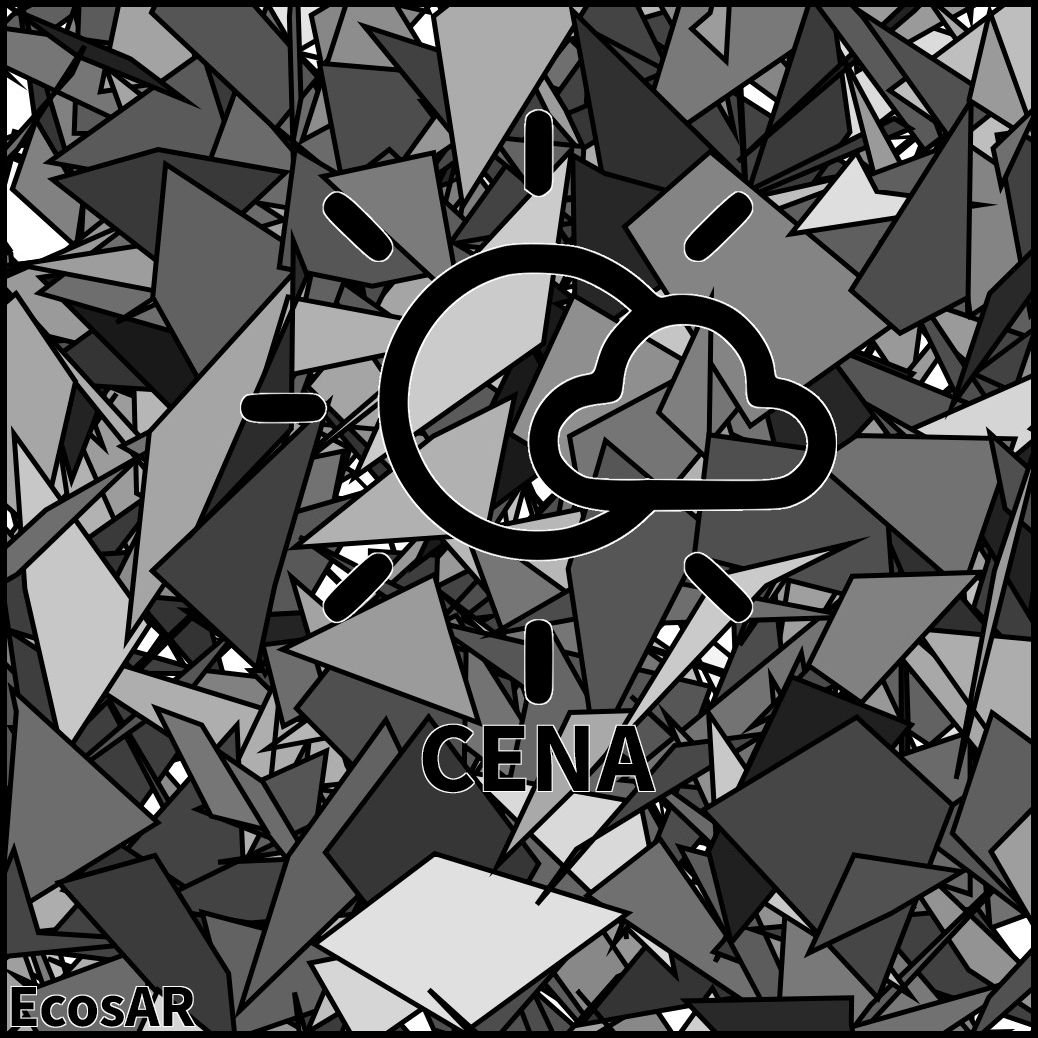
<style>
.page{position:relative;width:1038px;height:1038px}
.page>*{position:absolute;margin:0}
.t1{font:100px "SourceSansRoman-Bold";color:#000000}
.t2{font:60px "SourceSansRoman-Bold";color:#000000}
</style>
<div class="page">
<p class="t1" style="left:422px;top:724px;width:233px;height:69px">CENA</p>
<p class="t2" style="left:11px;top:987px;width:184px;height:40px">EcosAR</p>
</div>
